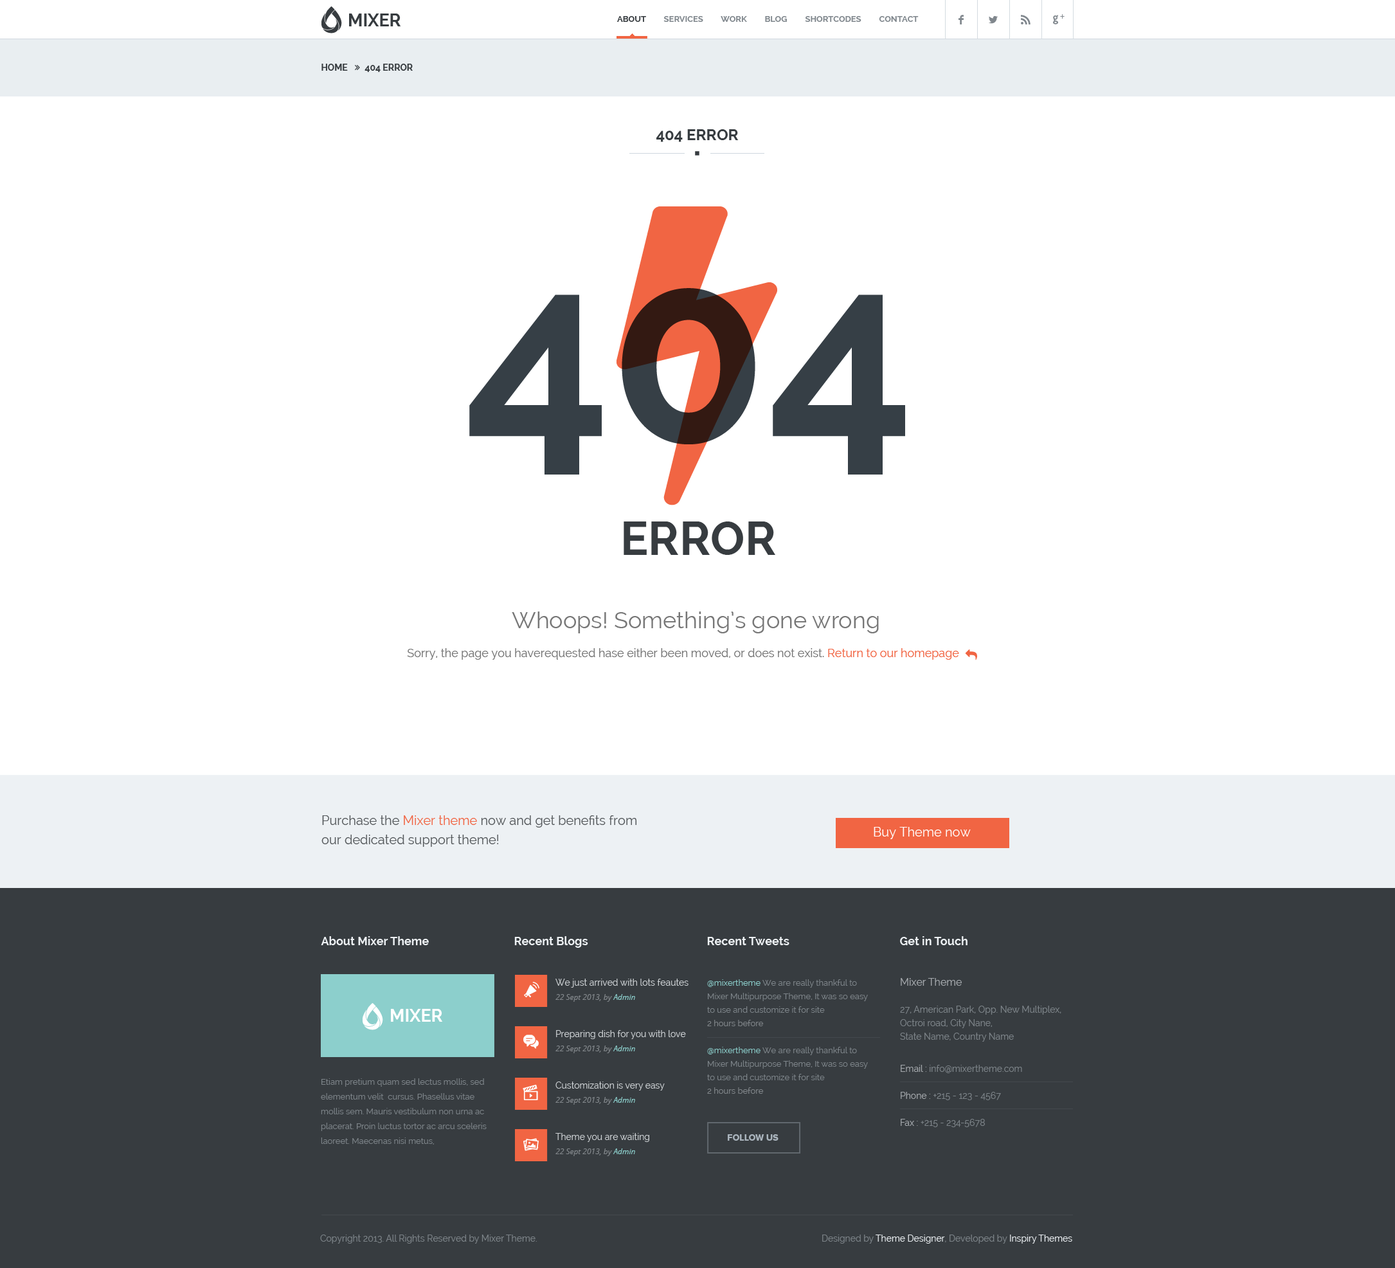
<style>
.page{position:relative;width:1395px;height:1268px;background:#ffffff}
.page>*{position:absolute;margin:0}
.t1{font:17.4px "Raleway-Bold";color:#373c40}
.t2{font:8.4px "Raleway-Bold";color:#80878d;text-transform:uppercase}
.t3{font:8.4px "Raleway-Bold";color:#373c40;text-transform:uppercase}
.t4{font:15.4px "Socialico";color:#80878d}
.t5{font:9px "ProximaNovaA-Regular";color:#80878d}
.t6{font:9px "Raleway-Bold";color:#373c40;text-transform:uppercase}
.t7{font:15.4px "Raleway-Bold";color:#373c40;text-transform:uppercase}
.t8{font:257.1px "Raleway-Bold";color:#363f46;text-transform:uppercase}
.t9{font:46.3px "Raleway-Bold";color:#373c40;text-transform:uppercase}
.t10{font:23.1px "Raleway";color:#777777}
.t11{font:11.6px "Raleway";color:#777777}
.t12{font:11.6px "Raleway";color:#f16543}
.t13{font:12.9px/19.3px "Raleway";color:#55595c}
.t14{font:12.9px/19.3px "Raleway";color:#f16543}
.t15{font:12.9px "Raleway";color:#ffffff}
.t16{font:11.6px "Raleway-Bold";color:#edf1f4}
.t17{font:9px/13.5px "Raleway";color:#7d8489}
.t18{font:10.3px/13.5px "Raleway";color:#a5a9ad}
.t19{font:9px "Raleway";color:#cdd1d4}
.t20{font:8.4px/13.5px "Raleway";color:#7d8489}
.t21{font:8.4px/13.5px "Raleway";color:#8ccfcc}
.t22{font:8.4px/13.5px "Raleway";color:#82878b}
.t23{font:7.7px "OpenSans-Italic";color:#82878b}
.t24{font:7.7px "OpenSans-Italic";color:#8ccfcc}
.t25{font:17.4px "Raleway-Bold";color:#ffffff}
.t26{font:9px/13.5px "Raleway";color:#a5a9ad}
.t27{font:8.4px/14.8px "Raleway";color:#7d8489}
.t28{font:9px "ProximaNova-Extrabld";color:#a9b3bc}
.t29{font:9px "Raleway";color:#7d8489}
.t30{font:9px "Raleway";color:#edf1f4}
</style>
<div class="page">
<p class="t1" style="left:349px;top:14px;width:52px;height:12px">MIXER</p>
<p class="t2" style="left:617px;top:16px;width:302px;height:6px"><span class="t3">About         </span>Services         Work         Blog         Shortcodes         Contact</p>
<p class="t4" style="left:959px;top:15px;width:5px;height:9px">F</p>
<p class="t4" style="left:989px;top:15px;width:9px;height:9px">L</p>
<p class="t4" style="left:1021px;top:15px;width:9px;height:9px">R</p>
<p class="t4" style="left:1053px;top:15px;width:5px;height:9px">G</p>
<p class="t5" style="left:1060px;top:14px;width:5px;height:5px">+</p>
<p class="t6" style="left:321px;top:64px;width:92px;height:8px">home        404 error</p>
<p class="t7" style="left:656px;top:129px;width:83px;height:13px">404 error</p>
<p class="t8" style="left:469px;top:288px;width:436px;height:186px">404</p>
<p class="t9" style="left:624px;top:521px;width:151px;height:34px">error</p>
<p class="t10" style="left:512px;top:611px;width:367px;height:22px">Whoops! Something’s gone wrong</p>
<p class="t11" style="left:407px;top:648px;width:552px;height:12px">Sorry, the page you haverequested hase either been moved, or does not exist. <span class="t12">Return to our homepage</span></p>
<p class="t13" style="left:321px;top:815px;width:316px;height:32px">Purchase the <span class="t14">Mixer theme</span> now and get benefits from <br>our dedicated support theme!</p>
<p class="t15" style="left:874px;top:827px;width:97px;height:12px">Buy Theme now</p>
<p class="t16" style="left:321px;top:936px;width:108px;height:9px">About Mixer Theme</p>
<p class="t16" style="left:514px;top:936px;width:74px;height:12px">Recent Blogs</p>
<p class="t16" style="left:707px;top:937px;width:82px;height:8px">Recent Tweets</p>
<p class="t16" style="left:900px;top:936px;width:68px;height:9px">Get in Touch</p>
<p class="t17" style="left:900px;top:978px;width:161px;height:63px"><span class="t18">Mixer Theme<br><br></span>27, American Park, Opp. New Multiplex,<br>Octroi road, City Nane,<br>State Name, Country Name</p>
<p class="t19" style="left:555px;top:978px;width:133px;height:9px">We just arrived with lots feautes</p>
<p class="t20" style="left:707px;top:979px;width:161px;height:115px"><span class="t21">@mixertheme </span>We are really thankful to <br>Mixer Multipurpose Theme, It was so easy <br>to use and customize it for site<br><span class="t22">2 hours before<br><br></span><span class="t21">@mixertheme </span>We are really thankful to <br>Mixer Multipurpose Theme, It was so easy <br>to use and customize it for site<br><span class="t22">2 hours before</span></p>
<p class="t23" style="left:555px;top:994px;width:80px;height:8px">22 Sept 2013, by <span class="t24">Admin</span></p>
<p class="t25" style="left:391px;top:1009px;width:52px;height:13px">MIXER</p>
<p class="t19" style="left:556px;top:1030px;width:130px;height:9px">Preparing dish for you with love</p>
<p class="t23" style="left:555px;top:1045px;width:80px;height:8px">22 Sept 2013, by <span class="t24">Admin</span></p>
<p class="t17" style="left:901px;top:1065px;width:121px;height:62px"><span class="t26">Email : </span>info@mixertheme.com<br><span class="t26"><br>Phone : </span>+215 - 123 - 4567<br><span class="t26"><br>Fax : </span>+215 - 234-5678</p>
<p class="t27" style="left:321px;top:1078px;width:166px;height:66px">Etiam pretium quam sed lectus mollis, sed <br>elementum velit  cursus. Phasellus vitae <br>mollis sem. Mauris vestibulum non urna ac <br>placerat. Proin luctus tortor ac arcu sceleris <br>laoreet. Maecenas nisi metus,</p>
<p class="t19" style="left:555px;top:1081px;width:110px;height:9px">Customization is very easy</p>
<p class="t23" style="left:555px;top:1097px;width:80px;height:7px">22 Sept 2013, by <span class="t24">Admin</span></p>
<p class="t19" style="left:555px;top:1133px;width:94px;height:9px">Theme you are waiting</p>
<p class="t28" style="left:728px;top:1134px;width:51px;height:6px">FOLLOW US</p>
<p class="t23" style="left:555px;top:1148px;width:80px;height:8px">22 Sept 2013, by <span class="t24">Admin</span></p>
<p class="t29" style="left:320px;top:1234px;width:217px;height:9px">Copyright 2013. All Rights Reserved by Mixer Theme.</p>
<p class="t30" style="left:822px;top:1234px;width:250px;height:9px"><span class="t29">Designed by </span>Theme Designer<span class="t29">, Developed by </span>Inspiry Themes</p>
</div>
